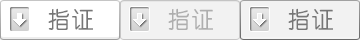
<style>
.page{position:relative;width:360px;height:40px;background:#f2f2f2}
.page>*{position:absolute;margin:0}
.t1{font:24px "CTZhongYuanSJ";color:#767676}
.t2{font:24px "CTZhongYuanSJ";color:#aeaeae}
</style>
<div class="page">
<p class="t1" style="left:48px;top:8px;width:45px;height:22px">指证</p>
<p class="t2" style="left:168px;top:8px;width:45px;height:22px">指证</p>
<p class="t1" style="left:288px;top:8px;width:45px;height:22px">指证</p>
</div>
